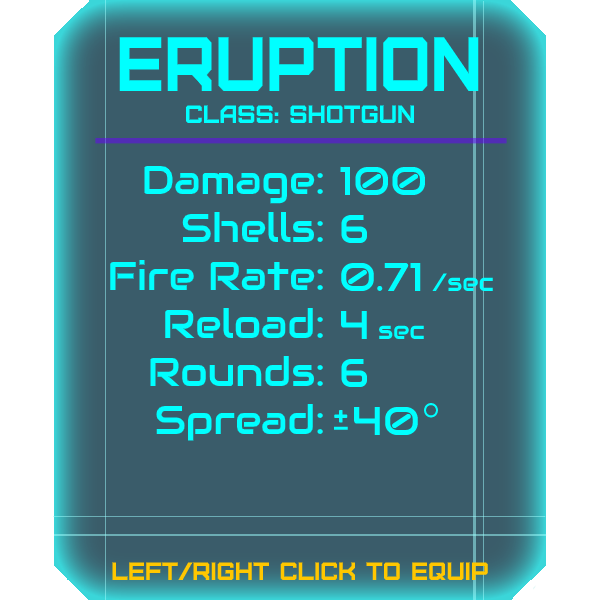
<style>
.page{position:relative;width:600px;height:600px;background:#3a5c6a}
.page>*{position:absolute;margin:0}
.t1{font:76.8px "Furore";color:#00ffff;scale:0.91 1}
.t2{font:25px "Furore";color:#00ffff}
.t3{font:40px "Audiowide-Regular";color:#00ffff}
.t4{font:25px "Audiowide-Regular";color:#00ffff}
.t5{font:25px "Furore";color:#ffc700}
</style>
<div class="page">
<p class="t1" style="left:119px;top:37px;width:360px;height:54px">eruption</p>
<p class="t2" style="left:186px;top:105px;width:228px;height:18px">Class: Shotgun</p>
<p class="t3" style="left:110px;top:165px;width:213px;height:276px;text-align:right">Damage:<br>Shells:<br>Fire Rate:<br>Reload:<br>Rounds:<br>Spread:</p>
<p class="t3" style="left:340px;top:166px;width:153px;height:269px">100<br>6<br>0.71 <span class="t4">/sec<br></span>4 <span class="t4">sec<br></span>6<br> 40</p>
<p class="t5" style="left:112px;top:562px;width:376px;height:18px">left/right click to equip</p>
</div>
